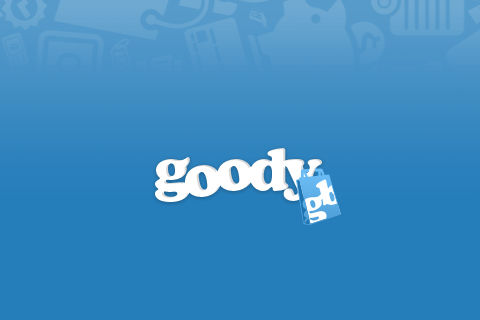
<style>
.page{position:relative;width:480px;height:320px;background:#257dba}
.page>*{position:absolute;margin:0}
.t1{font:60px "CooperBlackStd";letter-spacing:-0.1em;color:#ffffff}
</style>
<div class="page">
<p class="t1" style="left:155px;top:148px;width:167px;height:54px">goody</p>
</div>
